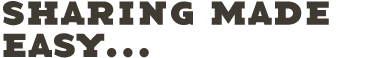
<style>
.page{position:relative;width:391px;height:58px;background:#ffffff}
.page>*{position:absolute;margin:0}
.t1{font:46.2px "BaseTwelveSerifSCB";letter-spacing:0.02em;color:#403b32}
</style>
<div class="page">
<p class="t1" style="left:3px;top:1px;width:326px;height:25px">sharing made</p>
<p class="t1" style="left:3px;top:33px;width:146px;height:25px">easy...</p>
</div>
